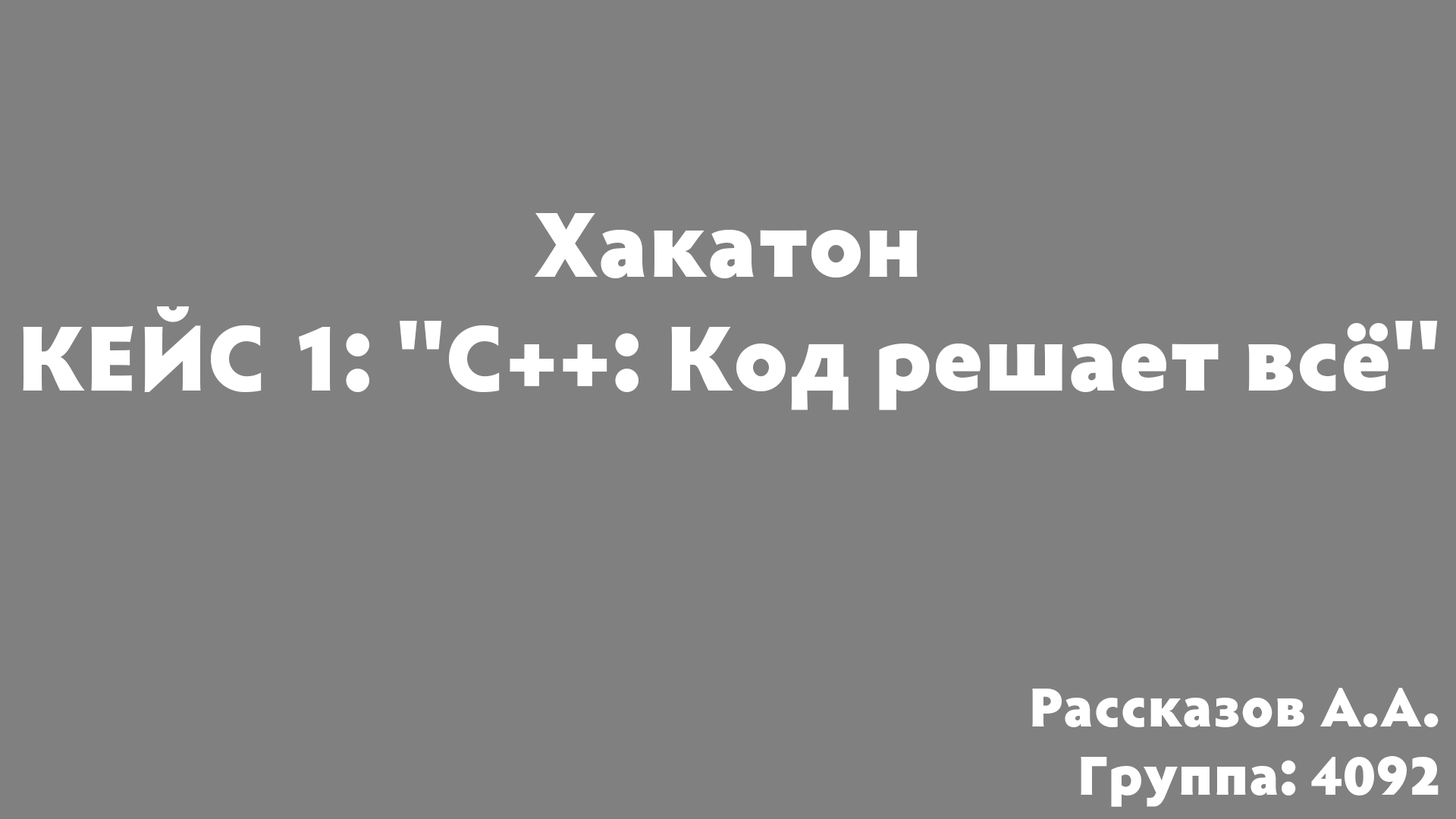
<style>
.page{position:relative;width:1456px;height:819px;background:#808080}
.page>*{position:absolute;margin:0}
.t1{font:94.8px "Radiance-Black";color:#ffffff}
.t2{font:56.9px "Radiance-Black";color:#ffffff}
</style>
<div class="page">
<p class="t1" style="left:23px;top:213px;width:1415px;height:197px;text-align:center">Хакатон<br>КЕЙС 1: "С++: Код решает всё"</p>
<p class="t2" style="left:1032px;top:688px;width:407px;height:119px;text-align:right">Рассказов А.А.<br>Группа: 4092</p>
</div>
